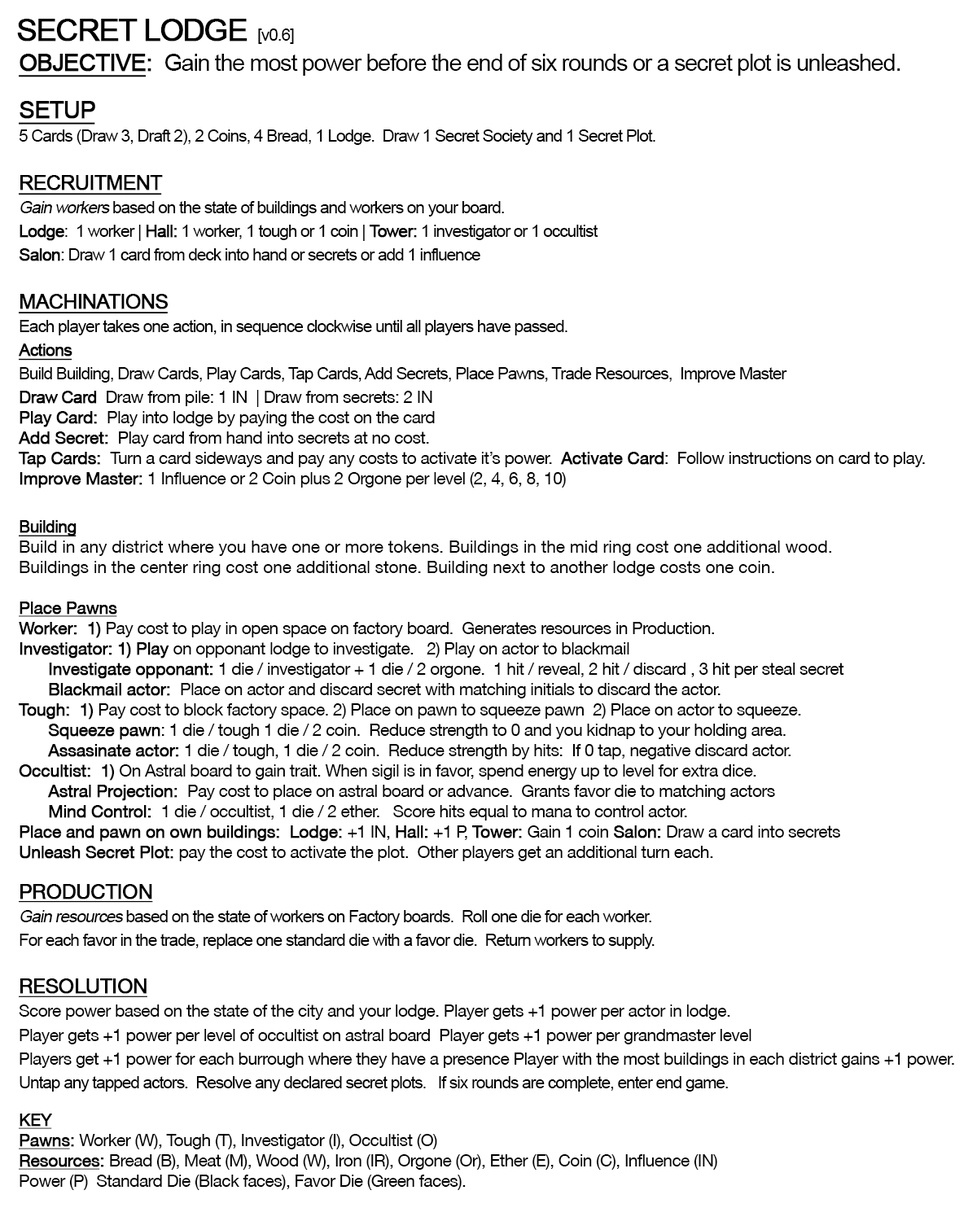
<style>
.page{position:relative;width:977px;height:1221px;background:#ffffff}
.page>*{position:absolute;margin:0}
.t1{font:30.5px "ArialMT";letter-spacing:-0.05em;color:#000000;font-weight:bold}
.t2{font:17px "ArialMT";letter-spacing:-0.05em;color:#000000}
.t3{font:17px/23.7px "HelveticaNeueLT-Roman";letter-spacing:-0.025em;color:#000000}
.t4{font:23.7px/23.7px "ArialMT";letter-spacing:-0.05em;color:#000000;font-weight:bold;text-decoration:underline}
.t5{font:23.7px/23.7px "ArialMT";letter-spacing:-0.05em;color:#000000;font-weight:bold}
.t6{font:23.7px/23.7px "ArialMT";letter-spacing:-0.05em;color:#000000}
.t7{font:17px/23.7px "ArialMT";letter-spacing:-0.05em;color:#000000}
.t8{font:20.3px/23.7px "ArialMT";letter-spacing:-0.05em;color:#000000;font-weight:bold;text-decoration:underline}
.t9{font:17px/23.7px "ArialMT";letter-spacing:-0.05em;color:#000000;font-style:italic}
.t10{font:17px/23.7px "ArialMT";letter-spacing:-0.05em;color:#000000;font-weight:bold}
.t11{font:17px/23.7px "ArialMT";letter-spacing:-0.05em;color:#000000;font-weight:bold;text-decoration:underline}
.t12{font:17px/20.3px "HelveticaNeueLT-Roman";letter-spacing:-0.025em;color:#000000}
.t13{font:17px/20.3px "HelveticaNeueLT-Roman";letter-spacing:-0.025em;color:#000000;font-weight:bold}
.t14{font:17px/20.3px "HelveticaNeueLT-Roman";color:#000000}
.t15{font:17px/20.3px "HelveticaNeueLT-Roman";letter-spacing:-0.025em;color:#000000;font-weight:bold;text-decoration:underline}
.t16{font:20.3px/13.6px "HelveticaNeueLT-Roman";letter-spacing:-0.025em;color:#000000;font-weight:bold;text-decoration:underline}
.t17{font:20.3px/23.7px "HelveticaNeueLT-Roman";letter-spacing:-0.025em;color:#000000;font-weight:bold;text-decoration:underline}
.t18{font:17px/23.7px "HelveticaNeueLT-Roman";letter-spacing:-0.025em;color:#000000;font-weight:bold;text-decoration:underline}
</style>
<div class="page">
<p class="t1" style="left:17px;top:19px;width:277px;height:25px">SECRET LODGE <span class="t2"> [v0.6]</span></p>
<p class="t3" style="left:18px;top:54px;width:936px;height:1136px"><span class="t4">OBJECTIVE</span><span class="t5">:  </span><span class="t6">Gain the most power before the end of six rounds or a secret plot is unleashed.<br><br></span><span class="t4">SETUP<br></span><span class="t7">5 Cards (Draw 3, Draft 2), 2 Coins, 4 Bread, 1 Lodge.  Draw 1 Secret Society and 1 Secret Plot. <br><br></span><span class="t8">RECRUITMENT<br></span><span class="t9">Gain workers</span><span class="t7"> based on the state of buildings and workers on your board.<br></span><span class="t10">Lodge</span><span class="t7">:  1 worker | </span><span class="t10">Hall:</span><span class="t7"> 1 worker, 1 tough or 1 coin | </span><span class="t10">Tower:</span><span class="t7"> 1 investigator or 1 occultist<br></span><span class="t10">Salon</span><span class="t7">: Draw 1 card from deck into hand or secrets or add 1 influence<br><br></span><span class="t8">MACHINATIONS<br></span><span class="t7">Each player takes one action, in sequence clockwise until all players have passed.<br></span><span class="t11">Actions<br></span><span class="t7">Build Building, Draw Cards, Play Cards, Tap Cards, Add Secrets, Place Pawns, Trade Resources,  Improve Master <br></span><span class="t10">Draw Card  </span><span class="t12">Draw from pile: 1 IN  | Draw from secrets: 2 IN<br></span><span class="t13">Play Card: </span><span class="t12"> Play into lodge by paying the cost on the card<br></span><span class="t13">Add Secret: </span><span class="t12"> Play card from hand into secrets at no cost.<br></span><span class="t13">Tap Cards:  </span><span class="t12">Turn a card sideways and pay any costs to activate it’s power.  </span><span class="t13">Activate Card</span><span class="t12">:  Follow instructions on card to play.<br></span><span class="t13">Improve Master: </span><span class="t12">1 Influence or 2 Coin plus 2 Orgone per level (2, 4, 6, 8, 10)<br></span><span class="t11"><br>Building<br></span><span class="t14">Build in any district where you have one or more tokens. Buildings in the mid ring cost one additional wood.<br>Buildings in the center ring cost one additional stone. Building next to another lodge costs one coin.<br></span><span class="t15"><br>Place Pawns<br></span><span class="t13">Worker:  1) </span><span class="t12">Pay cost to play in open space on factory board.  Generates resources in Production.<br></span><span class="t13">Investigator: 1) Play </span><span class="t12">on opponant lodge to investigate.   2) Play on actor to blackmail<br></span><span class="t13"> Investigate opponant: </span><span class="t12">1 die / investigator + 1 die / 2 orgone.  1 hit / reveal, 2 hit / discard , 3 hit per steal secret<br></span><span class="t13"> Blackmail actor:  </span><span class="t12">Place on actor and discard secret with matching initials to discard the actor.<br></span><span class="t13">Tough:  1) </span><span class="t12">Pay cost to block factory space. 2) Place on pawn to squeeze pawn  2) Place on actor to squeeze.<br></span><span class="t13"> Squeeze pawn</span><span class="t12">: 1 die / tough 1 die / 2 coin.  Reduce strength to 0 and you kidnap to your holding area.<br></span><span class="t13"> Assasinate actor: </span><span class="t12">1 die / tough, 1 die / 2 coin.  Reduce strength by hits:  If 0 tap, negative discard actor.<br></span><span class="t13">Occultist:  1) </span><span class="t12">On Astral board to gain trait. When sigil is in favor, spend energy up to level for extra dice.<br></span><span class="t13"> Astral Projection:  </span><span class="t12">Pay cost to place on astral board or advance.  Grants favor die to matching actors<br></span><span class="t13"> Mind Control:  </span><span class="t12">1 die / occultist, 1 die / 2 ether.   Score hits equal to mana to control actor.<br></span><span class="t13">Place and pawn on own buildings:  Lodge: </span><span class="t12">+1 IN, </span><span class="t13">Hall: </span><span class="t12">+1 P, </span><span class="t13">Tower: </span><span class="t12">Gain 1 coin</span><span class="t13"> Salon: </span><span class="t12">Draw a card into secrets<br></span><span class="t13">Unleash Secret Plot: </span><span class="t12">pay the cost to activate the plot.  Other players get an additional turn each.<br><br></span><span class="t16"><br>PRODUCTION<br></span><span class="t9">Gain resources</span><span class="t7"> based on the state of workers on Factory boards.  Roll one die for each worker.<br>For each favor in the trade, replace one standard die with a favor die.  Return workers to supply.<br><br></span><span class="t17">RESOLUTION<br></span>Score power based on the state of the city and your lodge. Player gets +1 power per actor in lodge.<br>Player gets +1 power per level of occultist on astral board  Player gets +1 power per grandmaster level<br>Players get +1 power for each burrough where they have a presence Player with the most buildings in each district gains +1 power.<br><span class="t7">Untap any tapped actors.  Resolve any declared secret plots.   If six rounds are complete, enter end game.<br><br></span><span class="t18">KEY<br></span><span class="t15">Pawns</span><span class="t13">: </span><span class="t12">Worker (W), Tough (T), Investigator (I), Occultist (O)<br></span><span class="t15">Resources</span><span class="t13">: </span><span class="t12">Bread (B), Meat (M), Wood (W), Iron (IR), Orgone (Or), Ether (E), Coin (C), Influence (IN)<br>Power (P)  Standard Die (Black faces), Favor Die (Green faces).</span></p>
</div>
